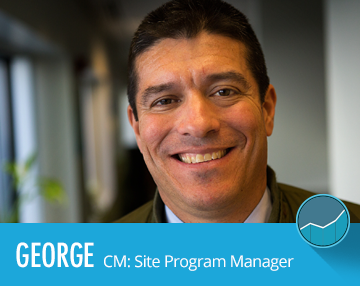
<style>
.page{position:relative;width:360px;height:286px}
.page>*{position:absolute;margin:0}
.t1{font:32px "Futura-CondensedMedium";letter-spacing:-0.01em;color:#ffffff}
.t2{font:16px "OpenSans";letter-spacing:-0.025em;color:#ffffff}
</style>
<div class="page">
<p class="t1" style="left:16px;top:242px;width:78px;height:26px">GEORGE</p>
<p class="t2" style="left:104px;top:255px;width:190px;height:16px">CM: Site Program Manager</p>
</div>
